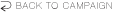
<style>
.page{position:relative;width:118px;height:13px;background:#ffffff}
.page>*{position:absolute;margin:0}
.t1{font:9px "HelveticaNeue-UltraLight";letter-spacing:0.11em}
</style>
<div class="page">
<p class="t1" style="left:16px;top:2px;width:96px;height:7px">BACK TO CAMPAIGN</p>
<p class="t1" style="left:16px;top:2px;width:96px;height:7px">BACK TO CAMPAIGN</p>
</div>
